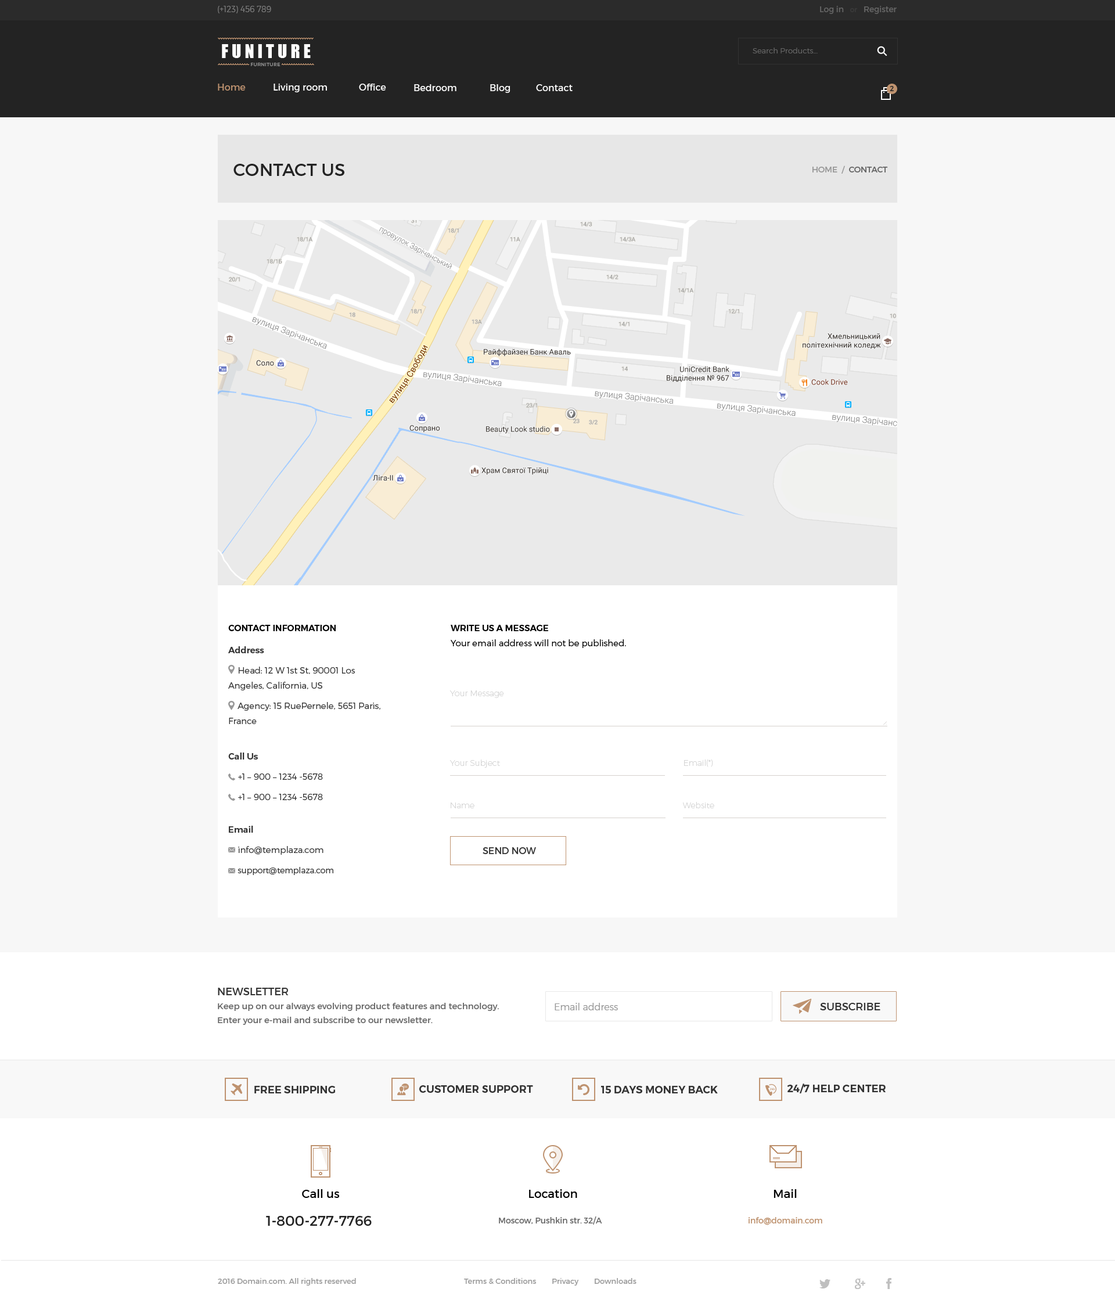
<style>
.page{position:relative;width:1115px;height:1303px;background:#ffffff}
.page>*{position:absolute;margin:0}
.t1{font:8.1px "Montserrat-Light";color:#7f7f7f}
.t2{font:8.1px "Montserrat-Regular";color:#666666}
.t3{font:7px "Montserrat-Regular";color:#3b3b3b}
.t4{font:7.5px "Montserrat-Light";color:#666666}
.t5{font:9.3px "Montserrat-Regular";color:#be926f}
.t6{font:9.3px "Montserrat-Regular";color:#ffffff}
.t7{font:7px "Montserrat-Regular";color:#232323}
.t8{font:17.4px "Montserrat-Regular";color:#232323;text-transform:uppercase}
.t9{font:8.1px "Montserrat-Regular";color:#999999;text-transform:uppercase}
.t10{font:8.1px "Montserrat-Regular";color:#666666;text-transform:uppercase}
.t11{font:8.7px "Montserrat-SemiBold";color:#000000}
.t12{font:8.7px/15.1px "Montserrat-Light";color:#000000}
.t13{font:8.7px/15.1px "Montserrat-SemiBold";color:#000000}
.t14{font:8.7px/15.1px "Montserrat-Light";color:#333333}
.t15{font:8.7px/20.3px "Montserrat-SemiBold";color:#333333}
.t16{font:8.7px/20.3px "Montserrat-Light";color:#333333}
.t17{font:8.7px/17.4px "Montserrat-SemiBold";color:#333333}
.t18{font:8.7px/17.4px "Montserrat-Light";color:#333333}
.t19{font:8.1px/15.1px "Montserrat-Light";color:#333333}
.t20{font:8.1px "Montserrat-UltraLight";color:#d4d4d4}
.t21{font:9.3px "Montserrat-Regular";color:#333333;text-transform:uppercase}
.t22{font:8.7px/13.9px "Montserrat-Regular";color:#666666}
.t23{font:10.5px/13.9px "Montserrat-Regular";color:#333333;text-transform:uppercase}
.t24{font:9.3px "Montserrat-Light";color:#999999}
.t25{font:10.5px "Montserrat-Regular";color:#333333;text-transform:uppercase}
.t26{font:10.5px "Montserrat-SemiBold";color:#333333}
.t27{font:10.5px "Montserrat-SemiBold";color:#333333;text-transform:uppercase}
.t28{font:11.6px "Montserrat-Regular";color:#000000}
.t29{font:13.9px "Montserrat-Regular";color:#232323}
.t30{font:8.1px "Montserrat-Regular";color:#be926f}
.t31{font:7.5px "Montserrat-Regular";color:#999999}
</style>
<div class="page">
<p class="t1" style="left:218px;top:6px;width:53px;height:7px">(+123) 456 789</p>
<p class="t2" style="left:820px;top:6px;width:77px;height:8px">Log in   <span class="t3">or</span>   Register</p>
<p class="t4" style="left:753px;top:48px;width:65px;height:5px">Search Products...</p>
<p class="t5" style="left:218px;top:84px;width:28px;height:7px">Home</p>
<p class="t6" style="left:273px;top:84px;width:54px;height:8px">Living room</p>
<p class="t6" style="left:359px;top:84px;width:27px;height:7px">Office</p>
<p class="t6" style="left:414px;top:84px;width:42px;height:7px">Bedroom</p>
<p class="t6" style="left:490px;top:84px;width:20px;height:9px">Blog</p>
<p class="t6" style="left:536px;top:84px;width:37px;height:7px">Contact</p>
<p class="t7" style="left:890px;top:86px;width:4px;height:5px">2</p>
<p class="t8" style="left:233px;top:164px;width:111px;height:12px">contact us</p>
<p class="t9" style="left:812px;top:165px;width:76px;height:9px">Home  /<span class="t10">  contact</span></p>
<p class="t11" style="left:228px;top:625px;width:108px;height:6px">CONTACT INFORMATION</p>
<p class="t12" style="left:451px;top:625px;width:175px;height:23px;text-align:justify"><span class="t13">WRITE US A MESSAGE<br></span>Your email address will not be published.</p>
<p class="t14" style="left:228px;top:646px;width:152px;height:229px"><span class="t15">Address<br></span><span class="t16">    Head: 12 </span>W 1st St, 90001 Los Angeles, California, US<br>    Agency: 15 RuePernele, 5651 Paris, France<br><br><span class="t15">Call Us</span><span class="t16"><br>    +1 – 900</span> – 1234 -5678<br>    +1 – 900 – 1234 -5678<br><br><span class="t17">Email<br>    </span><span class="t18">info@t</span>emplaza.com<br>    <span class="t19">support@templaza.com</span></p>
<p class="t20" style="left:450px;top:690px;width:54px;height:8px">Your Message</p>
<p class="t20" style="left:450px;top:759px;width:50px;height:9px">Your Subject</p>
<p class="t20" style="left:684px;top:759px;width:29px;height:8px">Email(*)</p>
<p class="t20" style="left:451px;top:802px;width:23px;height:6px">Name</p>
<p class="t20" style="left:683px;top:802px;width:31px;height:6px">Website</p>
<p class="t21" style="left:483px;top:847px;width:53px;height:7px">send now</p>
<p class="t22" style="left:218px;top:988px;width:281px;height:37px"><span class="t23">NEWSLETTER<br></span>Keep up on our always evolving product features and technology. <br>Enter your e-mail and subscribe to our newsletter.</p>
<p class="t24" style="left:555px;top:1003px;width:63px;height:7px">Email address</p>
<p class="t25" style="left:820px;top:1003px;width:60px;height:7px">subscribe</p>
<p class="t26" style="left:254px;top:1086px;width:81px;height:7px">FREE SHIPPING</p>
<p class="t26" style="left:419px;top:1085px;width:114px;height:8px">CUSTOMER SUPPORT</p>
<p class="t26" style="left:601px;top:1086px;width:117px;height:7px">15 DAYS MONEY BACK</p>
<p class="t27" style="left:787px;top:1083px;width:98px;height:10px"><span class="t26">24/7 </span>Help Center</p>
<p class="t28" style="left:302px;top:1189px;width:37px;height:9px">Call us</p>
<p class="t28" style="left:529px;top:1189px;width:48px;height:9px">Location</p>
<p class="t28" style="left:773px;top:1189px;width:24px;height:9px">Mail</p>
<p class="t29" style="left:266px;top:1216px;width:106px;height:10px">1-800-277-7766</p>
<p class="t2" style="left:499px;top:1216px;width:103px;height:9px">Moscow, Pushkin str. 32/A</p>
<p class="t30" style="left:748px;top:1217px;width:74px;height:8px">info@domain.com</p>
<p class="t31" style="left:218px;top:1278px;width:138px;height:8px">2016 Domain.com. All rights reserved</p>
<p class="t31" style="left:464px;top:1278px;width:172px;height:8px">Terms &amp; Conditions        Privacy        Downloads</p>
</div>
